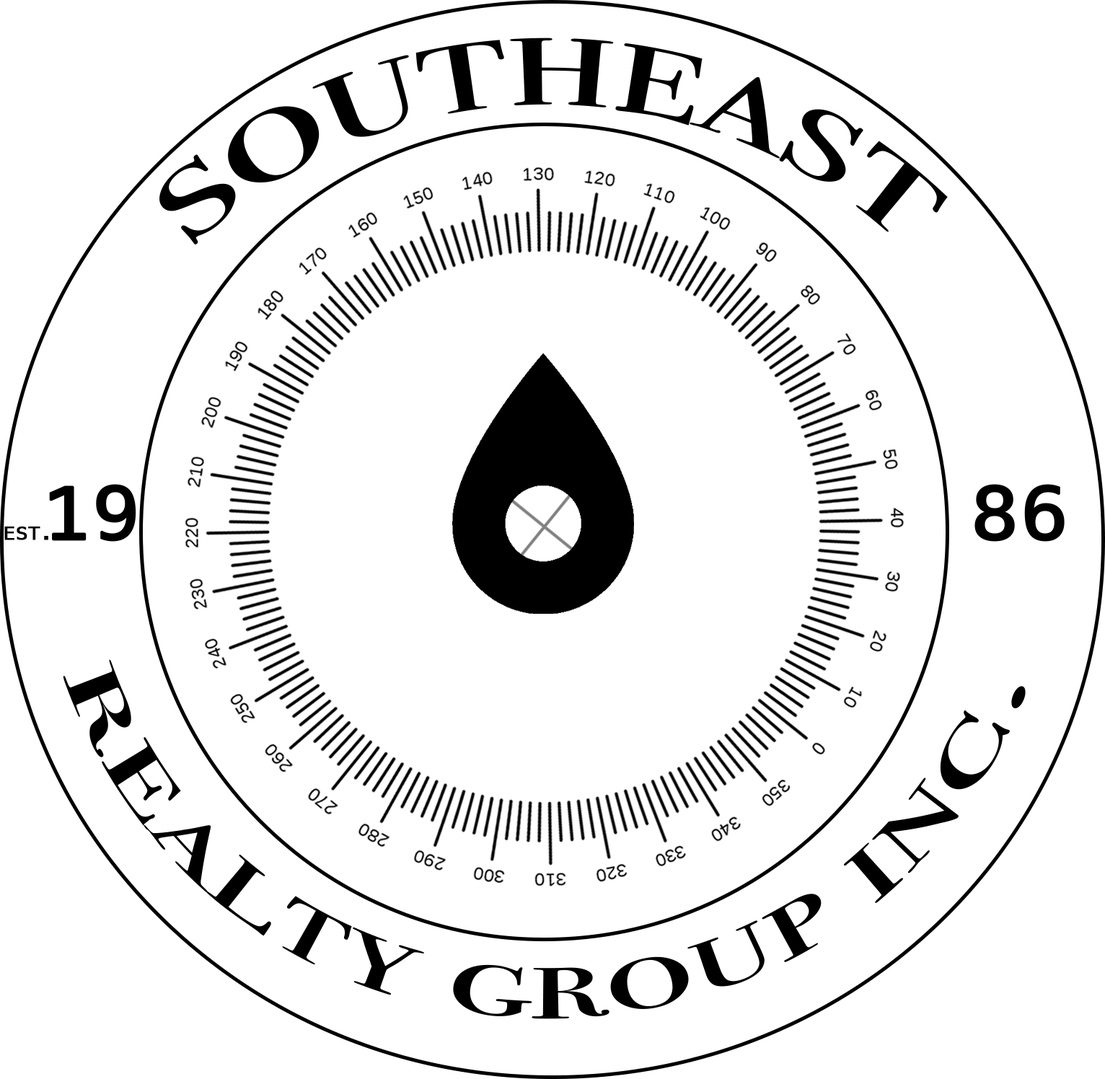
<style>
.page{position:relative;width:1105px;height:1079px;background:#ffffff}
.page>*{position:absolute;margin:0}
.t1{font:144.3px "BodoniSvtyTwoSCITCTT-Book";color:#000000;scale:1.1 1}
.t2{font:72.1px "Menlo-Regular";color:#000000;font-weight:bold;scale:1.1 1}
.t3{font:18px "Menlo-Regular";color:#000000;font-weight:bold;scale:1.1 1}
.t4{font:108.2px "BodoniSvtyTwoSCITCTT-Book";color:#000000;scale:1.1 1}
</style>
<div class="page">
<p class="t1" style="left:159px;top:38px;width:789px;height:207px">southeast</p>
<p class="t2" style="left:49px;top:484px;width:87px;height:58px">19</p>
<p class="t2" style="left:974px;top:484px;width:91px;height:58px">86</p>
<p class="t3" style="left:4px;top:527px;width:44px;height:13px">EST.</p>
<p class="t4" style="left:63px;top:659px;width:963px;height:360px;text-align:center">realty group inc.</p>
</div>
